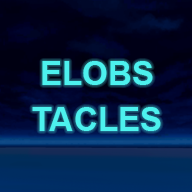
<style>
.page{position:relative;width:192px;height:192px}
.page>*{position:absolute;margin:0}
.t1{font:33.3px/45.8px "Arial-BoldMT";color:#4cf1ee}
</style>
<div class="page">
<p class="t1" style="left:32px;top:61px;width:129px;height:70px;text-align:center">ELOBS<br>TACLES</p>
</div>
